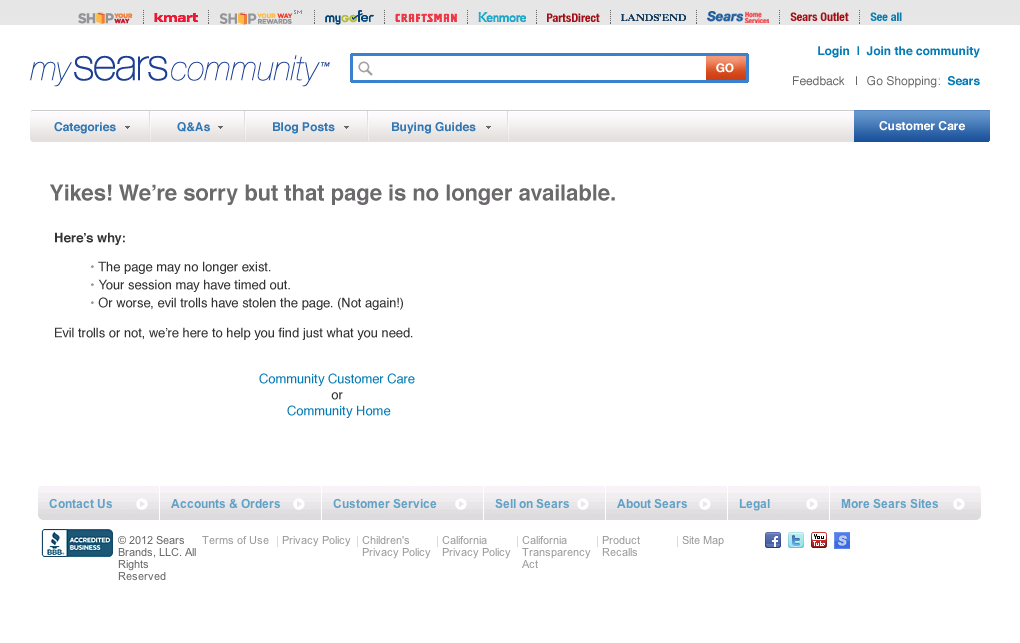
<style>
.page{position:relative;width:1020px;height:643px;background:#ffffff}
.page>*{position:absolute;margin:0}
.t1{font:12px "Helvetica-Bold";color:#067bb5}
.t2{font:12px "Helvetica";color:#666666}
.t3{font:12px "Helvetica-Bold";color:#3177b3}
.t4{font:12px "Helvetica-Bold";color:#ffffff}
.t5{font:22px "Helvetica-Bold";color:#6b696b}
.t6{font:13px/15px "Helvetica";color:#333333}
.t7{font:13px/23px "Helvetica-Bold";color:#333333}
.t8{font:13px/18px "Helvetica";color:#999999}
.t9{font:13px/11px "Helvetica";color:#999999}
.t10{font:13px/11px "Helvetica";color:#333333}
.t11{font:13px/15px "Helvetica";color:#999999}
.t12{font:13px/18px "Helvetica";color:#333333}
.t13{font:13px/23px "Helvetica";color:#067bb5}
.t14{font:13px/16px "Helvetica";color:#333333}
.t15{font:13px/16px "Helvetica";color:#067bb5}
</style>
<div class="page">
<p class="t1" style="left:818px;top:46px;width:162px;height:12px">Login  |  Join the community</p>
<p class="t2" style="left:793px;top:76px;width:64px;height:10px">Feedback   |</p>
<p class="t2" style="left:867px;top:76px;width:113px;height:12px">Go Shopping:  <span class="t1">Sears</span></p>
<p class="t3" style="left:54px;top:122px;width:62px;height:12px">Categories</p>
<p class="t3" style="left:177px;top:122px;width:33px;height:10px">Q&amp;As</p>
<p class="t3" style="left:273px;top:122px;width:62px;height:12px">Blog Posts</p>
<p class="t3" style="left:392px;top:122px;width:84px;height:12px">Buying Guides</p>
<p class="t4" style="left:879px;top:121px;width:86px;height:10px">Customer Care</p>
<p class="t5" style="left:50px;top:184px;width:565px;height:21px">Yikes! We’re sorry but that page is no longer available.</p>
<p class="t6" style="left:55px;top:232px;width:360px;height:186px"><span class="t7">Here’s why:<br></span><span class="t8"> <br></span><span class="t9"> •</span><span class="t10"> The page may no longer exist.<br> </span><span class="t11">• </span><span class="t12">Your session may have timed out.<br> </span><span class="t8">•</span><span class="t12"> Or worse, evil trolls have stolen the page. (Not again!)<br></span><br>Evil trolls or not, we’re here to help you find just what you need.<br><br><span class="t13">Community Customer Care</span><span class="t14">   <br>or<br></span><span class="t15"> Community Home</span></p>
</div>
